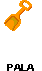
<style>
.page{position:relative;width:42px;height:71px;background:#ffffff}
.page>*{position:absolute;margin:0}
.t1{font:10.3px "Arial-BoldMT";color:#000000;scale:1.11 1}
</style>
<div class="page">
<p class="t1" style="left:7px;top:64px;width:27px;height:7px">PALA</p>
</div>
